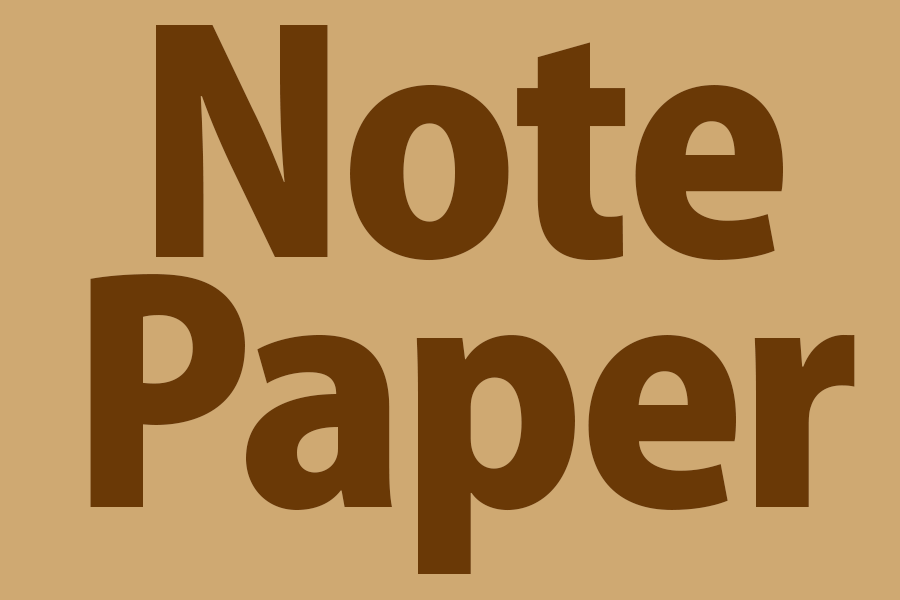
<style>
.page{position:relative;width:900px;height:600px;background:#cfa972}
.page>*{position:absolute;margin:0}
.t1{font:300px/250px "KozGoPro-Heavy";letter-spacing:-0.025em;color:#6a3906}
.t2{font:300px/250px "KozGoPro-Heavy";letter-spacing:-0.05em;color:#6a3906}
</style>
<div class="page">
<p class="t1" style="left:90px;top:25px;width:765px;height:549px;text-align:center">Note<br><span class="t2">P</span>aper</p>
</div>
